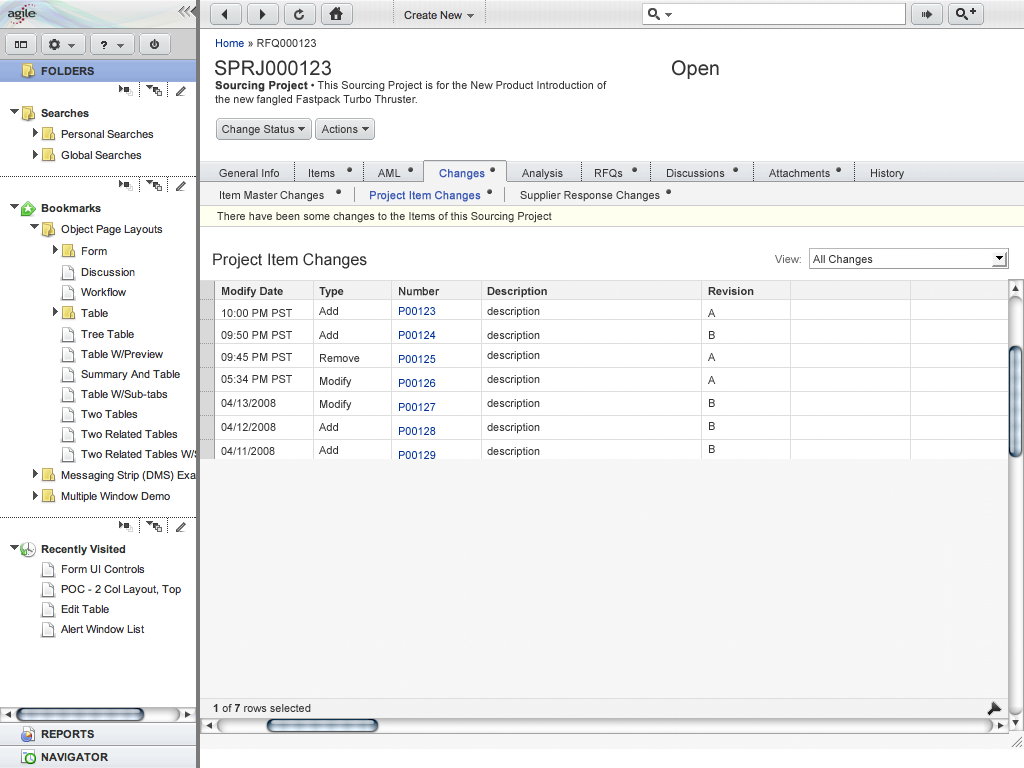
<style>
.page{position:relative;width:1024px;height:768px;background:#ffffff}
.page>*{position:absolute;margin:0}
.t1{font:11px "ArialMT";color:#333333}
.t2{font:11px "ArialMT";color:#003399}
.t3{font:20px "ArialMT";color:#333333}
.t4{font:11px/14px "ArialMT";color:#333333}
.t5{font:11px/14px "Arial-BoldMT";color:#333333;font-weight:bold}
.t6{font:11px "ArialMT";color:#3c5ab3;font-weight:bold}
.t7{font:16px "ArialMT";letter-spacing:0.005em;color:#303030}
.t8{font:11px "ArialMT";letter-spacing:0.005em;color:#666666}
.t9{font:11px "ArialMT";letter-spacing:0.005em;color:#303030}
.t10{font:11px/22px "ArialMT";color:#333333}
.t11{font:11px/20px "Arial-BoldMT";color:#303030}
.t12{font:11px/24px "ArialMT";color:#333333}
.t13{font:11px/23px "ArialMT";color:#303030}
.t14{font:11px/20px "ArialMT";color:#303030}
.t15{font:11px/24px "ArialMT";color:#003399}
.t16{font:11px/20px "ArialMT";color:#333333;font-weight:bold}
.t17{font:11px/20px "ArialMT";color:#003399}
.t18{font:11px/24px "ArialMT";color:#303030}
.t19{font:11px/23px "ArialMT";color:#333333}
.t20{font:11px "ArialMT";color:#303030}
.t21{font:11px "Arial-BoldMT";color:#303030}
</style>
<div class="page">
<p class="t1" style="left:216px;top:39px;width:100px;height:9px"><span class="t2">Home</span> » RFQ000123</p>
<p class="t3" style="left:215px;top:60px;width:116px;height:16px">SPRJ000123</p>
<p class="t3" style="left:672px;top:60px;width:47px;height:19px">Open</p>
<p class="t4" style="left:215px;top:81px;width:392px;height:25px"><span class="t5">Sourcing Project</span> • This Sourcing Project is for the New Product Introduction of<br>the new fangled Fastpack Turbo Thruster.</p>
<p class="t1" style="left:222px;top:125px;width:73px;height:11px">Change Status</p>
<p class="t1" style="left:321px;top:125px;width:37px;height:8px">Actions</p>
<p class="t1" style="left:219px;top:169px;width:60px;height:8px">General Info</p>
<p class="t1" style="left:309px;top:169px;width:26px;height:8px">Items</p>
<p class="t1" style="left:378px;top:169px;width:23px;height:8px">AML</p>
<p class="t6" style="left:439px;top:169px;width:46px;height:11px">Changes</p>
<p class="t1" style="left:522px;top:169px;width:41px;height:11px">Analysis</p>
<p class="t1" style="left:595px;top:169px;width:28px;height:9px">RFQs</p>
<p class="t1" style="left:667px;top:169px;width:58px;height:8px">Discussions</p>
<p class="t1" style="left:769px;top:169px;width:61px;height:8px">Attachments</p>
<p class="t1" style="left:871px;top:169px;width:33px;height:11px">History</p>
<p class="t1" style="left:220px;top:191px;width:104px;height:11px">Item Master Changes</p>
<p class="t6" style="left:370px;top:191px;width:111px;height:11px">Project Item Changes</p>
<p class="t1" style="left:520px;top:191px;width:140px;height:11px">Supplier Response Changes</p>
<p class="t1" style="left:217px;top:212px;width:335px;height:11px">There have been some changes to the Items of this Sourcing Project</p>
<p class="t7" style="left:213px;top:253px;width:154px;height:16px">Project Item Changes</p>
<p class="t8" style="left:775px;top:255px;width:26px;height:8px">View:</p>
<p class="t9" style="left:813px;top:255px;width:60px;height:11px">All Changes</p>
<p class="t10" style="left:221px;top:287px;width:71px;height:168px"><span class="t11">Modify Date<br></span>10:00 PM PST<br>09:50 PM PST<br>09:45 PM PST<br>05:34 PM PST<br><span class="t12">04/13/2008<br>04/12/2008<br>04/11/2008</span></p>
<p class="t13" style="left:319px;top:287px;width:41px;height:167px"><span class="t11">Type<br></span><span class="t14">Add<br>Add <br></span>Remove<br>Modify<br>Modify<br>Add<br>Add</p>
<p class="t15" style="left:399px;top:287px;width:41px;height:172px"><span class="t16">Number<br></span><span class="t17">P00123<br></span>P00124<br>P00125<br>P00126<br>P00127<br>P00128<br>P00129</p>
<p class="t18" style="left:487px;top:287px;width:60px;height:171px"><span class="t11">Description<br></span><span class="t14">description<br>description <br>description<br></span>description<br>description<br>description<br>description</p>
<p class="t11" style="left:708px;top:287px;width:46px;height:166px">Revision<br><span class="t10">A<br>B<br>A<br></span><span class="t19">A<br>B<br>B<br>B</span></p>
<p class="t20" style="left:213px;top:704px;width:98px;height:8px"><span class="t21">1</span> of <span class="t21">7</span> rows selected</p>
</div>
